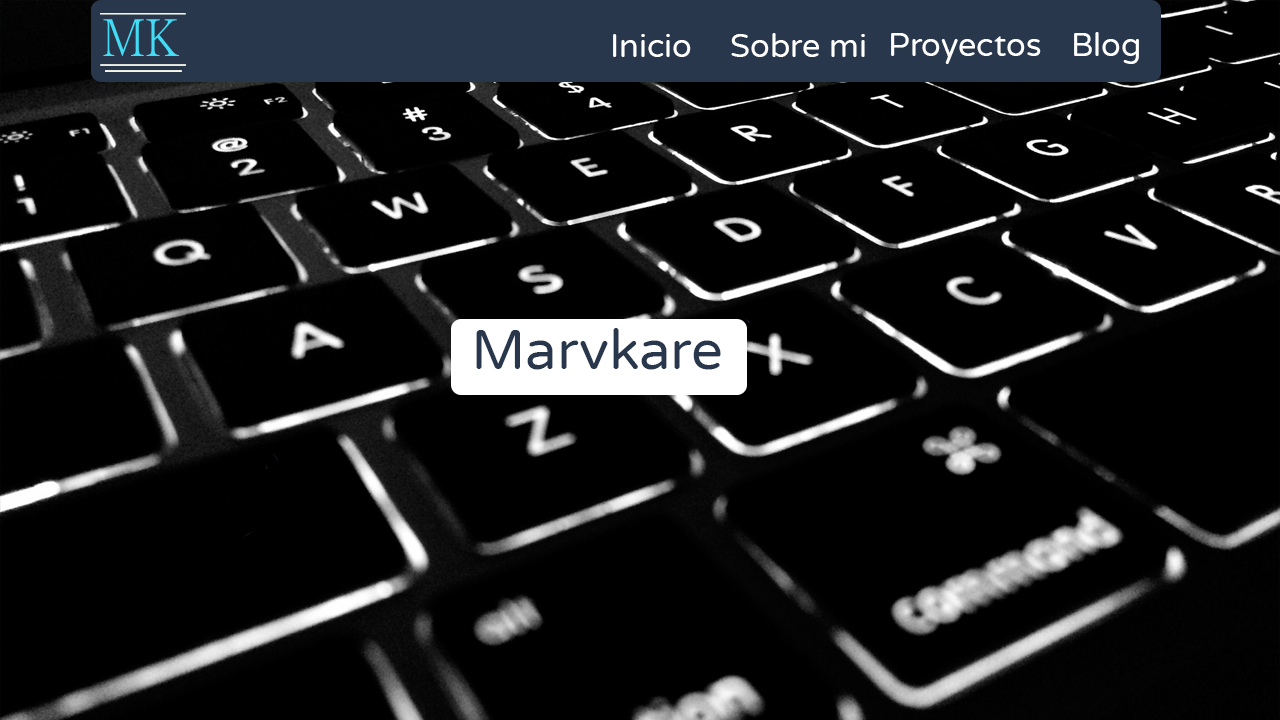
<style>
.page{position:relative;width:1280px;height:720px;background:#000000}
.page>*{position:absolute;margin:0}
.t1{font:51.2px "PMingLiU-ExtB";color:#43dcf7}
.t2{font:32px "VarelaRound-Regular";color:#ffffff}
.t3{font:56.4px "VarelaRound-Regular";color:#29374d}
</style>
<div class="page">
<p class="t1" style="left:103px;top:19px;width:76px;height:37px">MK</p>
<p class="t2" style="left:613px;top:34px;width:78px;height:23px">Inicio</p>
<p class="t2" style="left:731px;top:33px;width:134px;height:24px">Sobre mi</p>
<p class="t2" style="left:891px;top:33px;width:150px;height:31px">Proyectos</p>
<p class="t2" style="left:1074px;top:32px;width:65px;height:32px">Blog</p>
<p class="t3" style="left:476px;top:328px;width:245px;height:42px">Marvkare</p>
</div>
